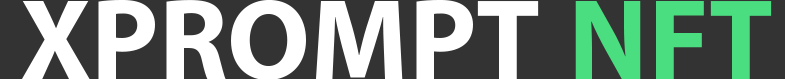
<style>
.page{position:relative;width:785px;height:79px;background:#333333}
.page>*{position:absolute;margin:0}
.t1{font:162.6px "MyriadArabic-Bold";color:#ffffff}
.t2{font:162.6px "MyriadArabic-Bold";color:#4ade80}
</style>
<div class="page">
<p class="t1" style="left:22px;top:0px;width:750px;height:80px">XPROMPT <span class="t2">NFT</span></p>
</div>
